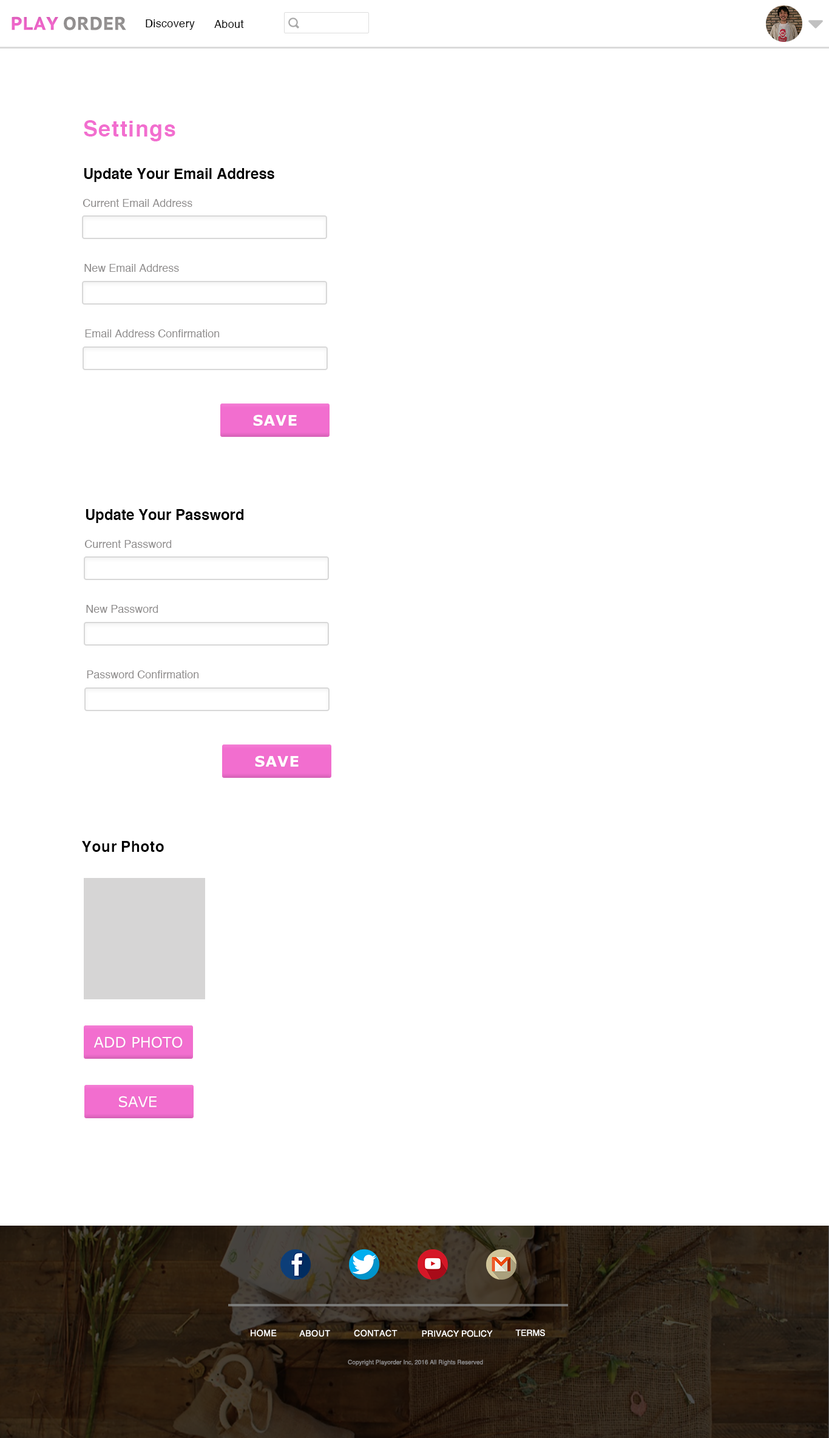
<style>
.page{position:relative;width:829px;height:1438px;background:#ffffff}
.page>*{position:absolute;margin:0}
.t1{font:18.2px "PTSans-CaptionBold";color:#9d9a9a}
.t2{font:18.2px "PTSans-CaptionBold";color:#fc6bd5}
.t3{font:10.9px "Helvetica";color:#000000}
.t4{font:21.8px "Helvetica-Bold";color:#f26ecf}
.t5{font:14.6px "Helvetica-Bold";color:#000000}
.t6{font:10.9px "Helvetica";color:#8f8d8d}
.t7{font:14.6px "Verdana-Bold";color:#ffffff}
.t8{font:14.6px "Verdana";color:#ffffff}
.t9{font:8.5px "Helvetica";color:#ffffff}
.t10{font:6.1px "Helvetica";color:#8f8d8d}
</style>
<div class="page">
<p class="t1" style="left:12px;top:16px;width:114px;height:14px"><span class="t2">PLAY </span>ORDER</p>
<p class="t3" style="left:146px;top:19px;width:49px;height:11px">Discovery</p>
<p class="t3" style="left:214px;top:20px;width:30px;height:8px">About</p>
<p class="t4" style="left:84px;top:120px;width:91px;height:21px">Settings</p>
<p class="t5" style="left:84px;top:168px;width:190px;height:14px">Update Your Email Address</p>
<p class="t6" style="left:83px;top:199px;width:109px;height:8px">Current Email Address</p>
<p class="t6" style="left:84px;top:264px;width:95px;height:8px">New Email Address</p>
<p class="t6" style="left:85px;top:330px;width:135px;height:7px">Email Address Confirmation</p>
<p class="t7" style="left:253px;top:415px;width:44px;height:11px">SAVE</p>
<p class="t5" style="left:86px;top:509px;width:158px;height:14px">Update Your Password</p>
<p class="t6" style="left:84px;top:540px;width:88px;height:8px">Current Password</p>
<p class="t6" style="left:86px;top:605px;width:72px;height:8px">New Password</p>
<p class="t6" style="left:87px;top:671px;width:112px;height:8px">Password Confirmation</p>
<p class="t7" style="left:255px;top:756px;width:44px;height:11px">SAVE</p>
<p class="t5" style="left:82px;top:841px;width:82px;height:11px">Your Photo</p>
<p class="t8" style="left:93px;top:1037px;width:90px;height:11px">ADD PHOTO</p>
<p class="t8" style="left:119px;top:1096px;width:38px;height:12px">SAVE</p>
<p class="t9" style="left:251px;top:1330px;width:26px;height:7px">HOME</p>
<p class="t9" style="left:299px;top:1330px;width:31px;height:7px">ABOUT</p>
<p class="t9" style="left:354px;top:1330px;width:44px;height:7px">CONTACT</p>
<p class="t9" style="left:422px;top:1330px;width:71px;height:8px">PRIVACY POLICY</p>
<p class="t9" style="left:515px;top:1330px;width:30px;height:6px">TERMS</p>
<p class="t10" style="left:348px;top:1360px;width:135px;height:6px">Copyright Playorder Inc, 2016 All Rights Reserved</p>
</div>
